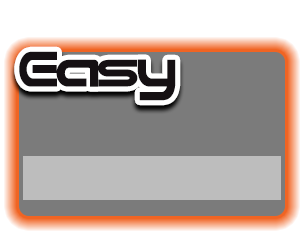
<style>
.page{position:relative;width:300px;height:240px;background:#7b7b7b}
.page>*{position:absolute;margin:0}
.t1{font:60px "NicoKaku";letter-spacing:-0.1em;color:#151013}
</style>
<div class="page">
<p class="t1" style="left:19px;top:51px;width:157px;height:50px">Easy</p>
</div>
